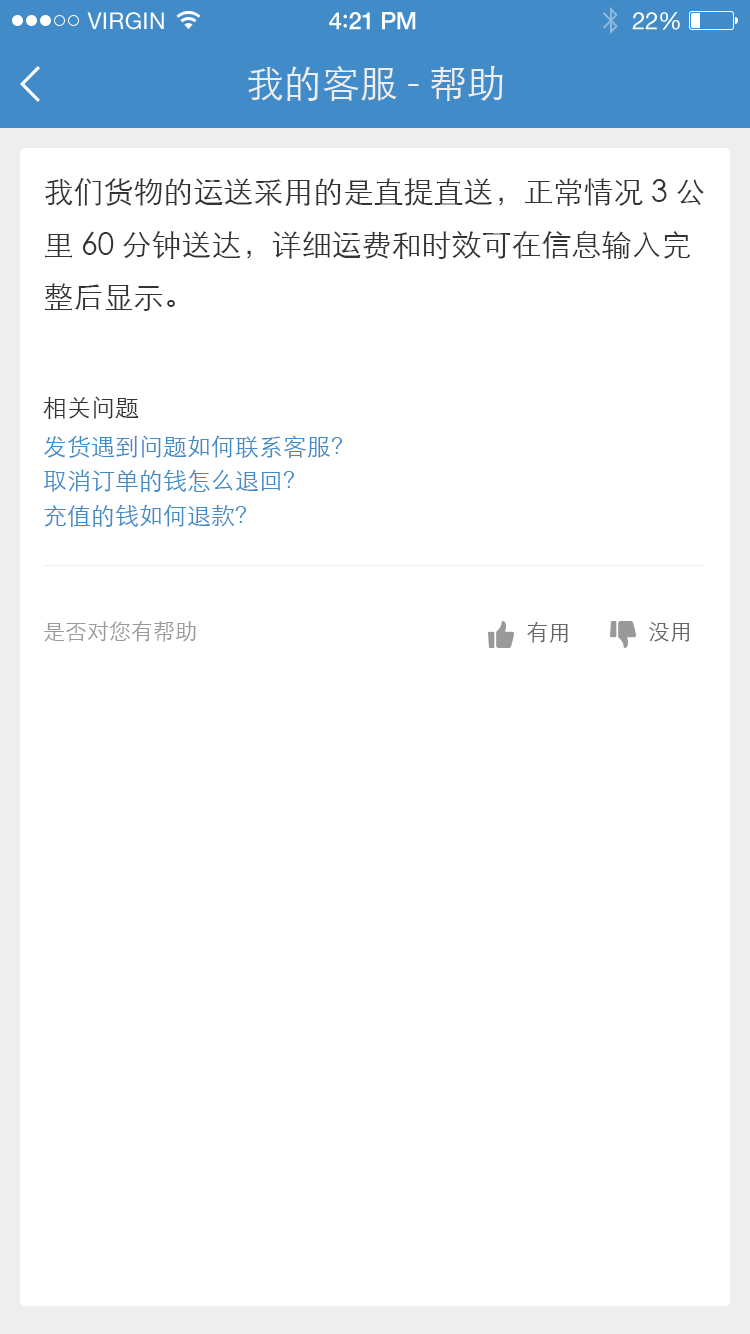
<style>
.page{position:relative;width:750px;height:1334px;background:#ffffff}
.page>*{position:absolute;margin:0}
.t1{font:23px "HelveticaNeue";letter-spacing:0.02em;color:#ffffff}
.t2{font:24px "HelveticaNeue-Medium";letter-spacing:-0.02em;color:#ffffff}
.t3{font:26px "Avenir-Medium";letter-spacing:-0.02em;color:#ffffff}
.t4{font:24px "HelveticaNeue";letter-spacing:-0.02em;color:#ffffff}
.t5{font:38px "STXihei";color:#eeeeee}
.t6{font:30px "STXihei";color:#333333}
.t7{font:24px "STXihei";color:#333333}
.t8{font:24px "STXihei";color:#418bc8}
.t9{font:22px "STXihei";color:#999999}
.t10{font:22px "STXihei";color:#666666}
</style>
<div class="page">
<p class="t1" style="left:87px;top:12px;width:77px;height:18px">VIRGIN</p>
<p class="t2" style="left:329px;top:12px;width:87px;height:18px">4<span class="t3">:</span>21 PM</p>
<p class="t4" style="left:632px;top:12px;width:48px;height:18px">22%</p>
<p class="t5" style="left:248px;top:66px;width:255px;height:35px">我的客服-帮助</p>
<p class="t6" style="left:44px;top:178px;width:660px;height:133px">我们货物的运送采用的是直提直送，正常情况3公里60分钟送达，详细运费和时效可在信息输入完整后显示。</p>
<p class="t7" style="left:43px;top:396px;width:96px;height:23px">相关问题</p>
<p class="t8" style="left:44px;top:435px;width:298px;height:23px">发货遇到问题如何联系客服？</p>
<p class="t8" style="left:44px;top:469px;width:250px;height:23px">取消订单的钱怎么退回？</p>
<p class="t8" style="left:44px;top:504px;width:202px;height:23px">充值的钱如何退款？</p>
<p class="t9" style="left:44px;top:621px;width:152px;height:21px">是否对您有帮助</p>
<p class="t10" style="left:527px;top:622px;width:41px;height:21px">有用</p>
<p class="t10" style="left:649px;top:622px;width:41px;height:20px">没用</p>
</div>
